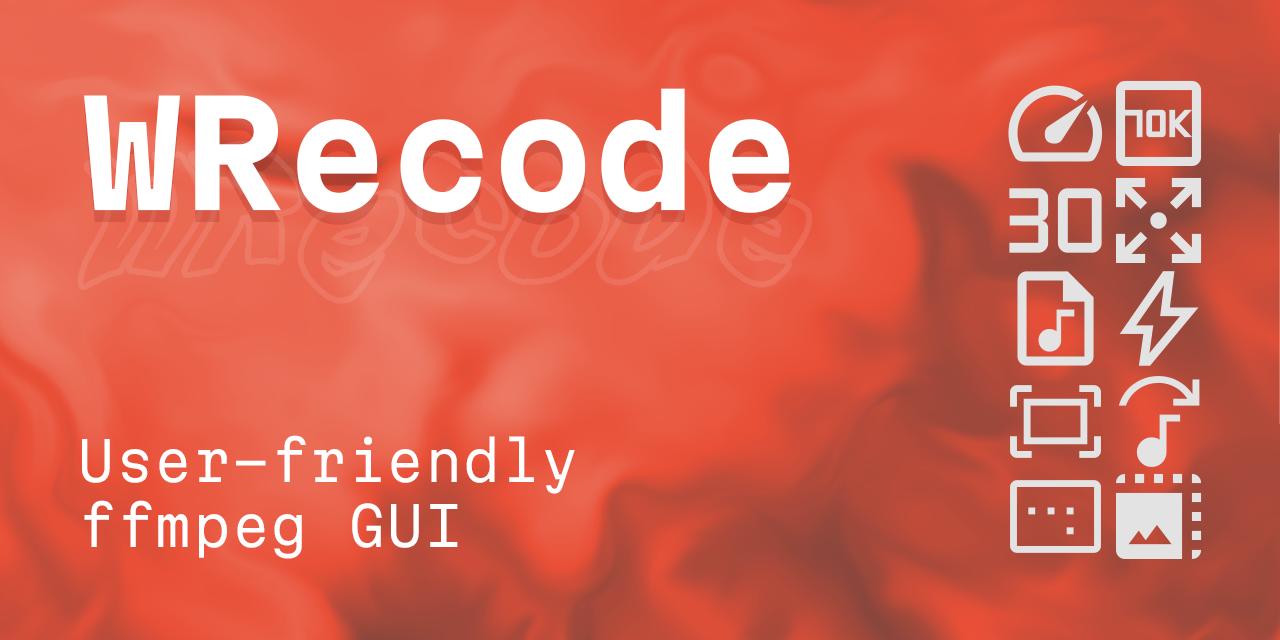
<style>
.page{position:relative;width:1280px;height:640px}
.page>*{position:absolute;margin:0}
.t1{font:143px "MartianMono-Bold";letter-spacing:0.02em;color:#ffffff}
.t2{font:53.7px "MartianMono-Light";letter-spacing:0.02em;color:#ffffff}
</style>
<div class="page">
<p class="t1" style="left:84px;top:88px;width:708px;height:125px">WRecode</p>
<p class="t2" style="left:82px;top:435px;width:493px;height:124px">User-friendly<br>ffmpeg GUI</p>
</div>
